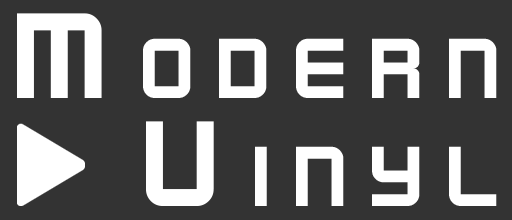
<style>
.page{position:relative;width:512px;height:220px;background:#333333}
.page>*{position:absolute;margin:0}
.t1{font:135.4px/108.5px "KenVector-Future-Thin";letter-spacing:0.1em;color:#ffffff;font-variant:small-caps}
</style>
<div class="page">
<p class="t1" style="left:17px;top:13px;width:480px;height:193px;text-align:right">Modern<br>Vinyl</p>
</div>
